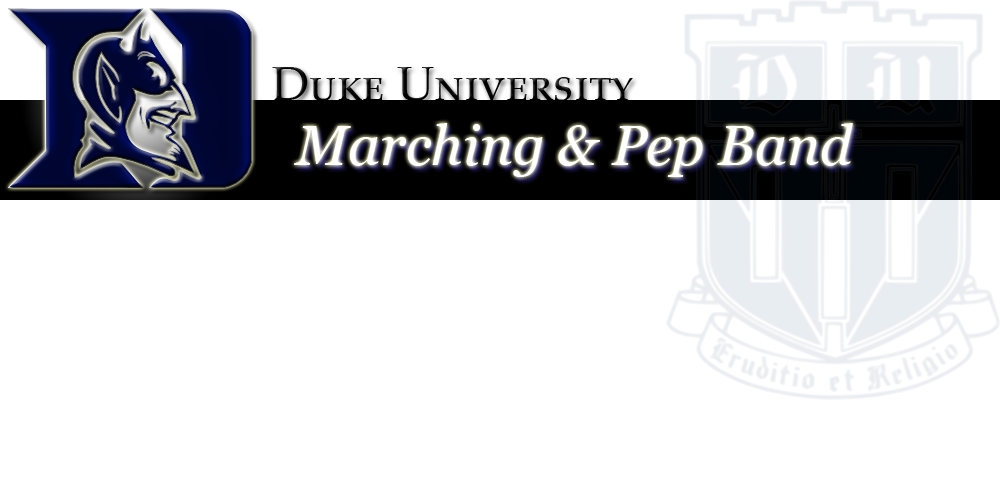
<style>
.page{position:relative;width:1000px;height:500px;background:#ffffff}
.page>*{position:absolute;margin:0}
.t1{font:48px "PalatinoLinotype-Roman";color:#000000;font-variant:small-caps}
.t2{font:56.1px "Georgia-Italic";color:#ffffff}
</style>
<div class="page">
<p class="t1" style="left:272px;top:67px;width:361px;height:34px">Duke University</p>
<p class="t2" style="left:294px;top:123px;width:559px;height:54px">Marching &amp; Pep Band</p>
</div>
